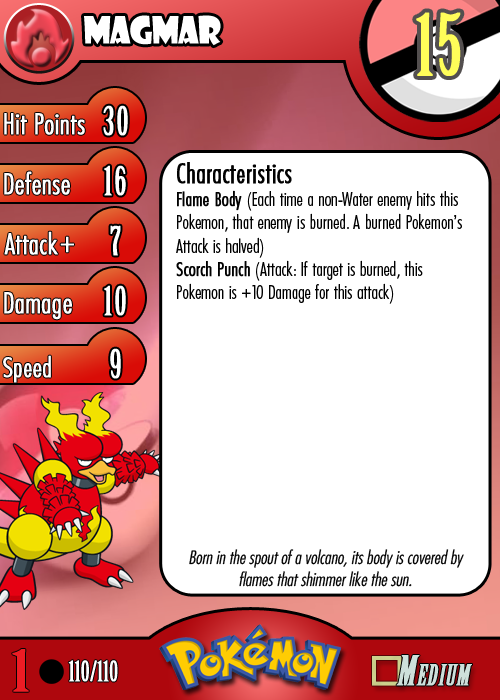
<style>
.page{position:relative;width:500px;height:700px;background:#ffffff}
.page>*{position:absolute;margin:0}
.t1{font:36.7px "ShowcardGothic-Reg";letter-spacing:-0.025em;color:#ffffff;scale:0.91 1}
.t2{font:83.3px "BirchStd";letter-spacing:0.025em;color:#fffd59;font-weight:bold}
.t3{font:27.8px "Futura-CondensedLight";color:#ffffff;font-weight:bold}
.t4{font:38.9px "BirchStd";letter-spacing:0.035em;color:#ffffff;font-weight:bold}
.t5{font:19.4px "FuturaCondensedBQ-Light";color:#010101}
.t6{font:27.8px "FuturaCondensedBQ-Light";color:#010101;font-weight:bold}
.t7{font:19.4px "FuturaCondensedBQ-Light";color:#010101;font-weight:bold}
.t8{font:30.6px "Futura-CondensedLight";color:#ffffff;font-weight:bold}
.t9{font:27.8px "FuturaCondensedBQ-Light";color:#ffffff;font-weight:bold}
.t10{font:18.1px "Futura-CondensedLight";color:#010101;font-style:italic}
.t11{font:55.6px "BirchStd";color:#ed1c24;font-weight:bold;scale:1.5 1}
.t12{font:27.8px "BirchStd";color:#ffffff;font-weight:bold}
</style>
<div class="page">
<p class="t1" style="left:84px;top:15px;width:137px;height:31px">magmar</p>
<p class="t2" style="left:416px;top:12px;width:45px;height:64px">15</p>
<p class="t3" style="left:4px;top:113px;width:81px;height:22px">Hit Points</p>
<p class="t4" style="left:103px;top:105px;width:25px;height:31px">30</p>
<p class="t3" style="left:4px;top:171px;width:66px;height:24px">Defense</p>
<p class="t4" style="left:104px;top:165px;width:22px;height:31px">16</p>
<p class="t5" style="left:176px;top:162px;width:286px;height:142px"><span class="t6">Characteristics<br></span><span class="t7">Flame Body </span>(Each time a non-Water enemy hits this Pokemon, that enemy is burned. A burned Pokemon’s Attack is halved)<br><span class="t7">Scorch Punch</span> (Attack: If target is burned, this Pokemon is +10 Damage for this attack)</p>
<p class="t3" style="left:4px;top:231px;width:54px;height:24px">Attack</p>
<p class="t4" style="left:110px;top:225px;width:11px;height:31px">7</p>
<p class="t8" style="left:60px;top:236px;width:14px;height:17px">+</p>
<p class="t3" style="left:4px;top:292px;width:68px;height:28px">Damage</p>
<p class="t4" style="left:104px;top:285px;width:22px;height:31px">10</p>
<p class="t4" style="left:110px;top:348px;width:11px;height:31px">9</p>
<p class="t9" style="left:3px;top:355px;width:48px;height:28px">Speed</p>
<p class="t10" style="left:189px;top:549px;width:275px;height:38px;text-align:center">Born in the spout of a volcano, its body is covered by flames that shimmer like the sun.</p>
<p class="t11" style="left:12px;top:649px;width:17px;height:43px">1</p>
<p class="t12" style="left:68px;top:660px;width:50px;height:22px">110/110</p>
</div>
